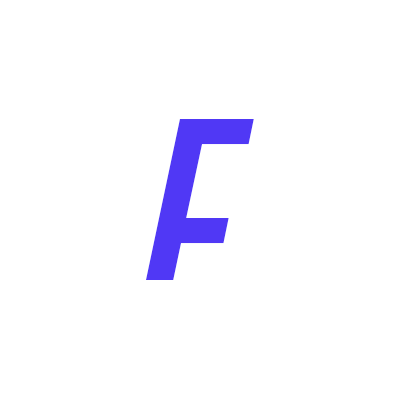
<style>
.page{position:relative;width:400px;height:400px;background:#ffffff}
.page>*{position:absolute;margin:0}
.t1{font:205.7px "Westmeath-Italic";letter-spacing:0.24em;color:#5038f5}
</style>
<div class="page">
<p class="t1" style="left:146px;top:119px;width:108px;height:161px">F</p>
</div>
